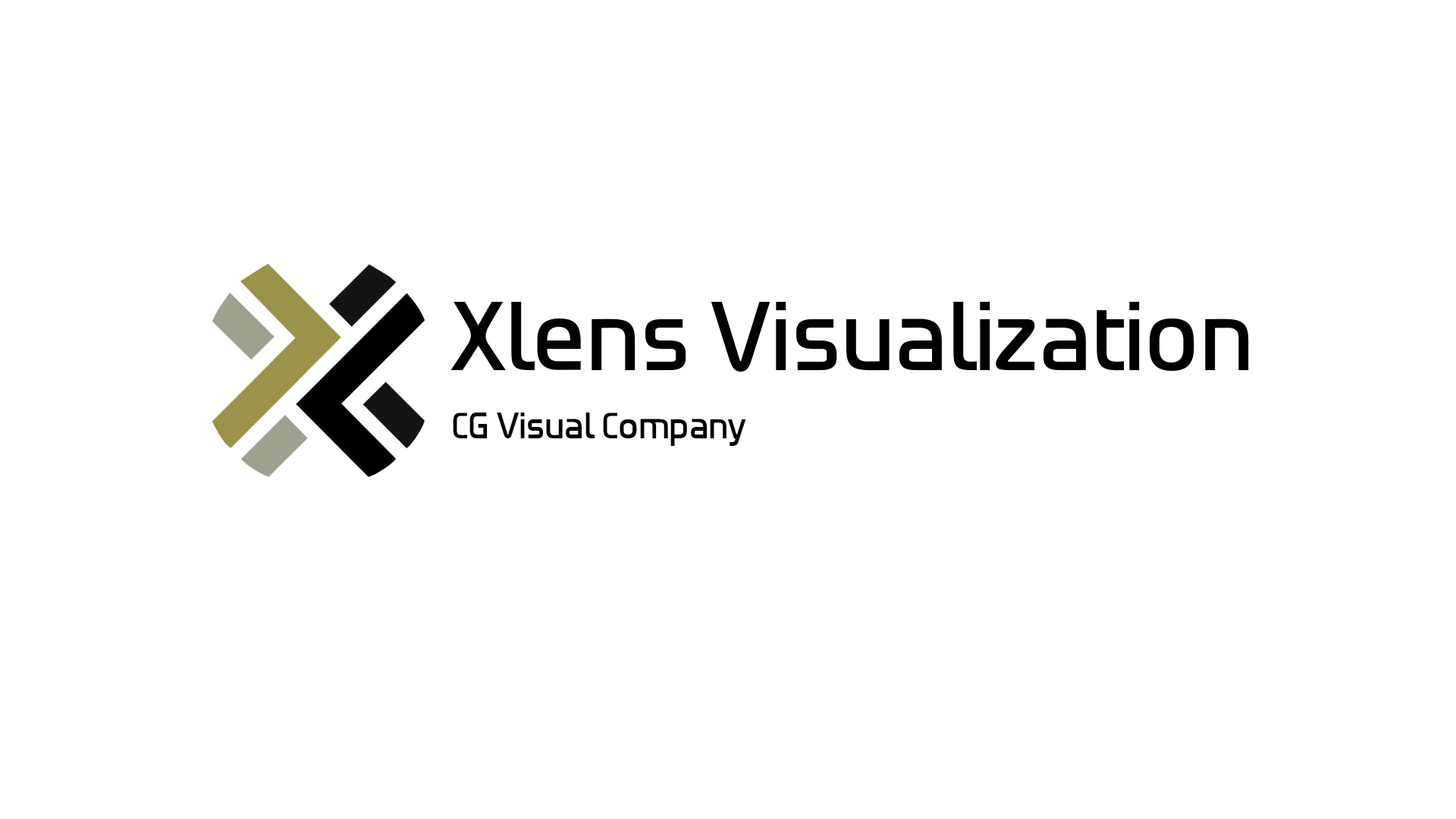
<style>
.page{position:relative;width:1456px;height:819px;background:#ffffff}
.page>*{position:absolute;margin:0}
.t1{font:104.1px "HGBGroteskMedW00-Regular";color:#000000}
.t2{font:38.4px "HGBGroteskMedW00-Regular";color:#000000}
</style>
<div class="page">
<p class="t1" style="left:450px;top:302px;width:799px;height:70px">Xlens Visualization</p>
<p class="t2" style="left:453px;top:413px;width:293px;height:33px">CG Visual Company</p>
</div>
